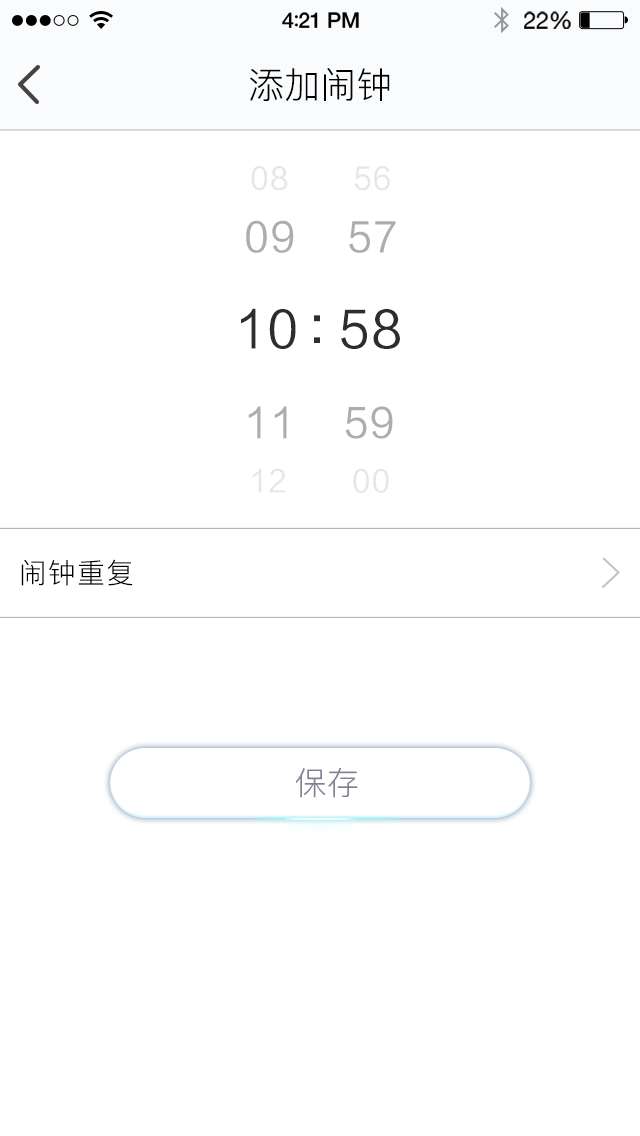
<style>
.page{position:relative;width:640px;height:1136px;background:#ffffff}
.page>*{position:absolute;margin:0}
.t1{font:36px "PingFang-SC-Regular";color:#000000}
.t2{font:30.1px "FZLTHJW--GB1-0";letter-spacing:0.04em;color:#e6e6e6;text-transform:uppercase}
.t3{font:40.1px "FZLTHJW--GB1-0";letter-spacing:0.04em;color:#adadad;text-transform:uppercase}
.t4{font:49.9px "FZLTHJW--GB1-0";letter-spacing:0.04em;color:#2d2d2d;text-transform:uppercase}
.t5{font:40px "FZLTHJW--GB1-0";letter-spacing:0.04em;color:#adadad;text-transform:uppercase}
.t6{font:30px "FZLTHJW--GB1-0";letter-spacing:0.04em;color:#e6e6e6;text-transform:uppercase}
.t7{font:28px "PingFang-SC-Regular";letter-spacing:0.04em;color:#000000}
.t8{font:32px "PingFang-SC-Regular";color:#7f8393}
</style>
<div class="page">
<p class="t1" style="left:250px;top:68px;width:140px;height:33px">添加闹钟</p>
<p class="t2" style="left:251px;top:166px;width:37px;height:25px">08</p>
<p class="t2" style="left:354px;top:166px;width:36px;height:25px">56</p>
<p class="t3" style="left:246px;top:220px;width:48px;height:33px">09</p>
<p class="t3" style="left:349px;top:221px;width:47px;height:32px">57</p>
<p class="t4" style="left:241px;top:308px;width:55px;height:41px">10</p>
<p class="t4" style="left:314px;top:315px;width:6px;height:28px">:</p>
<p class="t4" style="left:341px;top:308px;width:59px;height:41px">58</p>
<p class="t5" style="left:248px;top:406px;width:39px;height:33px">11</p>
<p class="t5" style="left:345px;top:406px;width:48px;height:33px">59</p>
<p class="t6" style="left:252px;top:468px;width:33px;height:25px">12</p>
<p class="t6" style="left:353px;top:468px;width:36px;height:25px">00</p>
<p class="t7" style="left:21px;top:559px;width:112px;height:27px">闹钟重复</p>
<p class="t8" style="left:295px;top:767px;width:63px;height:31px">保存</p>
</div>
